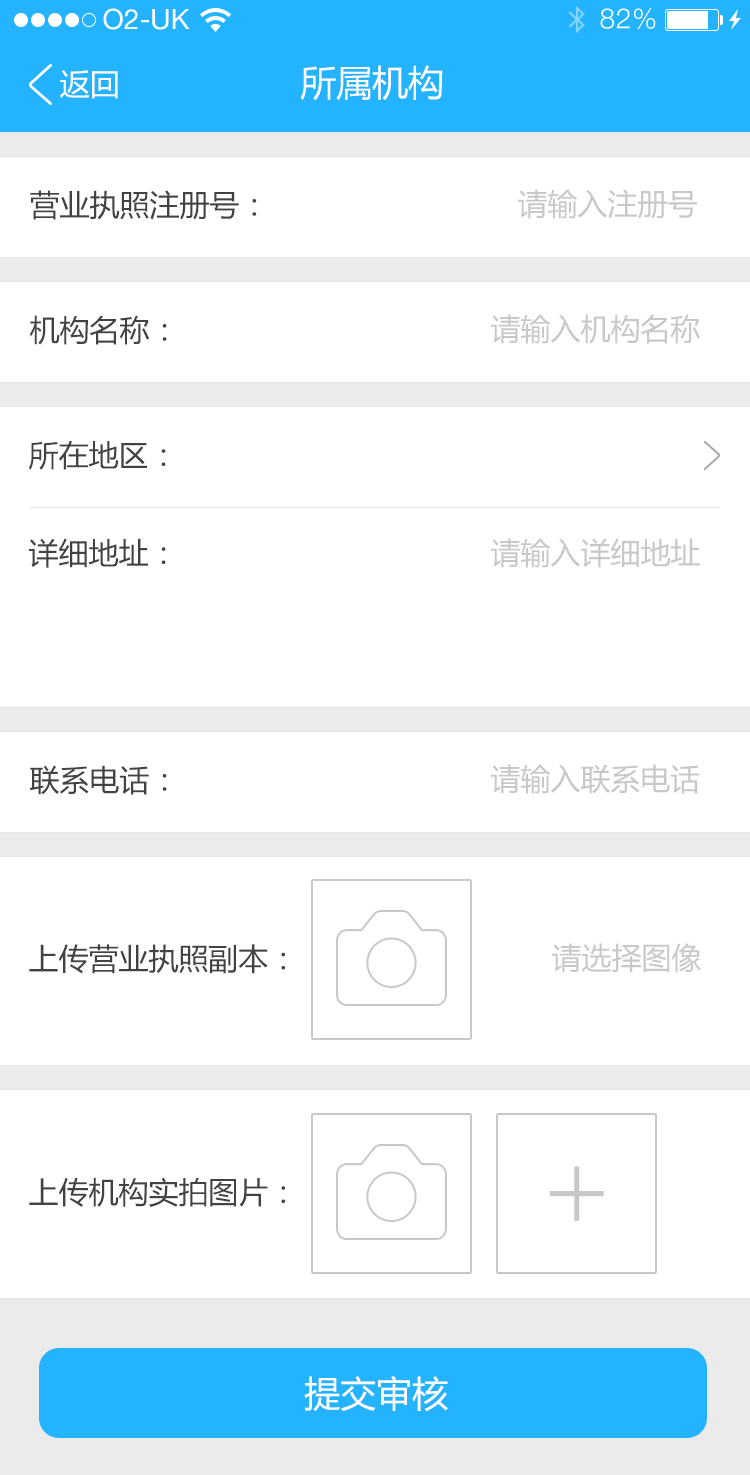
<style>
.page{position:relative;width:750px;height:1475px;background:#ffffff}
.page>*{position:absolute;margin:0}
.t1{font:36px "MicrosoftYaHei";color:#ffffff}
.t2{font:30px "MicrosoftYaHei";color:#ffffff}
.t3{font:30px "MicrosoftYaHei";color:#424242}
.t4{font:30px "MicrosoftYaHei";color:#c8c8c8}
.t5{font:113.4px "MicrosoftYaHeiLight";color:#c8c8c8}
</style>
<div class="page">
<p class="t1" style="left:300px;top:65px;width:143px;height:36px">所属机构</p>
<p class="t2" style="left:60px;top:70px;width:58px;height:29px">返回</p>
<p class="t3" style="left:30px;top:190px;width:227px;height:30px">营业执照注册号：</p>
<p class="t4" style="left:518px;top:189px;width:179px;height:30px">请输入注册号</p>
<p class="t3" style="left:30px;top:315px;width:137px;height:30px">机构名称：</p>
<p class="t4" style="left:491px;top:314px;width:209px;height:30px">请输入机构名称</p>
<p class="t3" style="left:28px;top:440px;width:138px;height:30px">所在地区：</p>
<p class="t3" style="left:29px;top:538px;width:137px;height:30px">详细地址：</p>
<p class="t4" style="left:491px;top:538px;width:209px;height:30px">请输入详细地址</p>
<p class="t3" style="left:30px;top:765px;width:137px;height:30px">联系电话：</p>
<p class="t4" style="left:491px;top:764px;width:209px;height:30px">请输入联系电话</p>
<p class="t3" style="left:29px;top:944px;width:257px;height:30px">上传营业执照副本：</p>
<p class="t4" style="left:552px;top:943px;width:149px;height:30px">请选择图像</p>
<p class="t5" style="left:549px;top:1166px;width:55px;height:55px">+</p>
<p class="t3" style="left:29px;top:1177px;width:257px;height:30px">上传机构实拍图片：</p>
<p class="t1" style="left:304px;top:1376px;width:144px;height:36px">提交审核</p>
</div>
